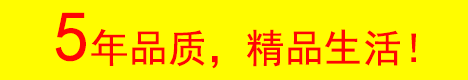
<style>
.page{position:relative;width:468px;height:80px;background:#fffc00}
.page>*{position:absolute;margin:0}
.t1{font:40px "SimHei";color:#fe0404}
.t2{font:72px "SimHei";color:#fe0404}
</style>
<div class="page">
<p class="t1" style="left:55px;top:12px;width:361px;height:57px"><span class="t2">5</span>年品质，精品生活！</p>
</div>
